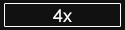
<style>
.page{position:relative;width:125px;height:30px;background:#111111}
.page>*{position:absolute;margin:0}
.t1{font:18px "ArialMT";color:#ffffff}
</style>
<div class="page">
<p class="t1" style="left:53px;top:9px;width:19px;height:13px">4x</p>
</div>
